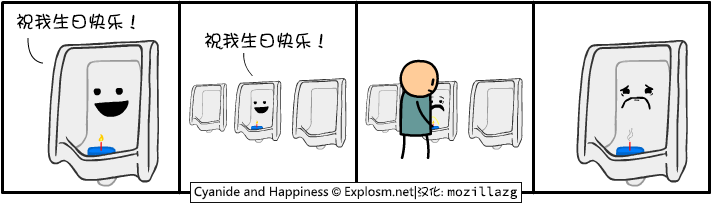
<style>
.page{position:relative;width:712px;height:204px;background:#ffffff}
.page>*{position:absolute;margin:0}
.t1{font:18px "DFGirl";color:#000000}
</style>
<div class="page">
<p class="t1" style="left:16px;top:13px;width:119px;height:17px">祝我生日快乐！</p>
<p class="t1" style="left:204px;top:32px;width:119px;height:17px">祝我生日快乐！</p>
</div>
